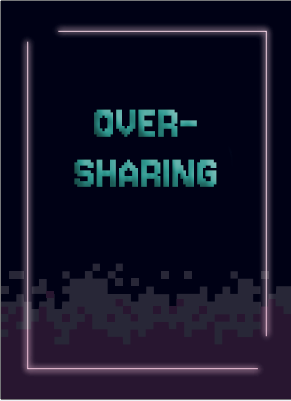
<style>
.page{position:relative;width:291px;height:401px;background:#000115}
.page>*{position:absolute;margin:0}
.t1{font:50px/50px "Jersey10-Regular";letter-spacing:0.025em}
</style>
<div class="page">
<p class="t1" style="left:74px;top:109px;width:143px;height:78px;text-align:center">OVER-<br>SHARING</p>
</div>
